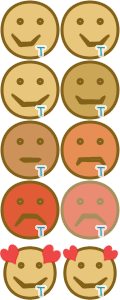
<style>
.page{position:relative;width:120px;height:300px;background:#e8c67b}
.page>*{position:absolute;margin:0}
.t1{font:12px/60px "ComicSansMS";letter-spacing:0.05em;color:#209cc4}
</style>
<div class="page">
<p class="t1" style="left:37px;top:46px;width:8px;height:250px">T<br>T<br>T<br>T<br>T</p>
<p class="t1" style="left:97px;top:46px;width:8px;height:250px">T<br>T<br>T<br>T<br>T</p>
</div>
